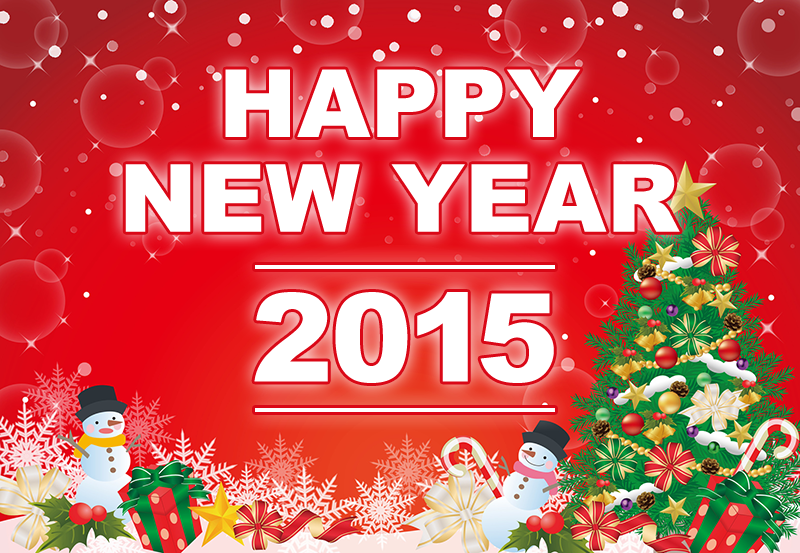
<style>
.page{position:relative;width:800px;height:553px}
.page>*{position:absolute;margin:0}
.t1{font:94.4px/1.3px "Arial-Black";color:#ffffff}
.t2{font:122.4px "Arial-Black";color:#ffffff}
</style>
<div class="page">
<p class="t1" style="left:125px;top:69px;width:555px;height:163px;text-align:center">HAPPY<br>NEW YEAR</p>
<p class="t2" style="left:254px;top:292px;width:300px;height:91px">2015</p>
</div>
